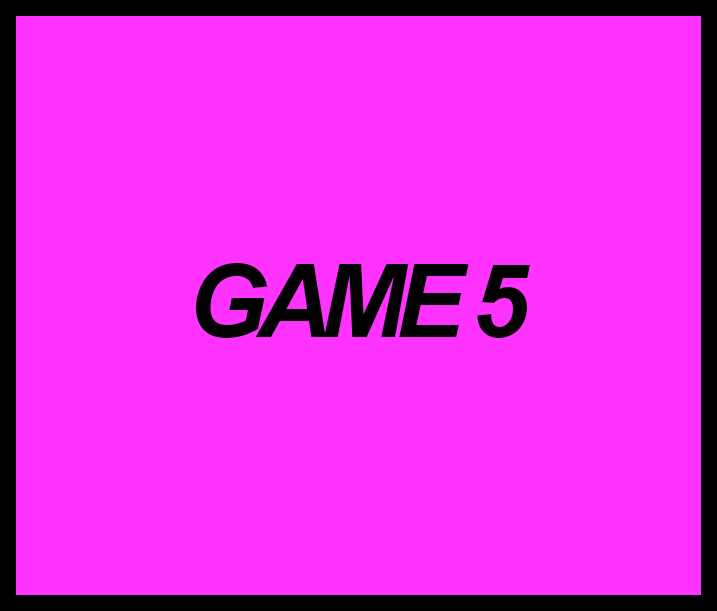
<style>
.page{position:relative;width:717px;height:611px;background:#ff33ff}
.page>*{position:absolute;margin:0}
.t1{font:102px "Arial-BoldItalicMT";letter-spacing:-0.1em;color:#000000}
</style>
<div class="page">
<p class="t1" style="left:196px;top:263px;width:334px;height:75px">GAME 5</p>
</div>
